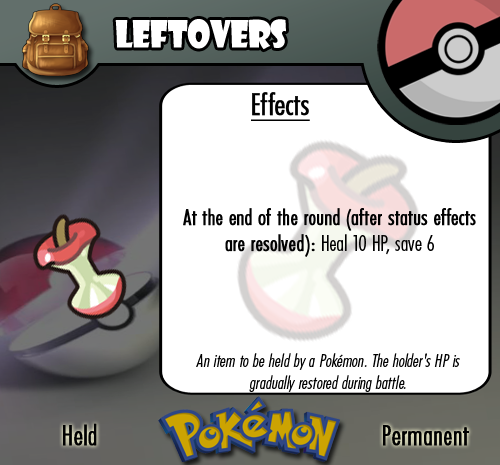
<style>
.page{position:relative;width:500px;height:465px;background:#ffffff}
.page>*{position:absolute;margin:0}
.t1{font:36.7px "ShowcardGothic-Reg";letter-spacing:-0.025em;color:#ffffff;scale:0.91 1}
.t2{font:22.2px "FuturaCondensedBQ-Light";color:#010101;font-weight:bold}
.t3{font:27.8px "FuturaCondensedBQ-Light";color:#010101;font-weight:bold}
.t4{font:30.6px "FuturaCondensedBQ-Light";color:#010101;font-weight:bold;text-decoration:underline}
.t5{font:22.2px "FuturaCondensedBQ-Light";color:#010101}
.t6{font:18.1px "FuturaCondensedBQ-Light";color:#010101;font-style:italic}
</style>
<div class="page">
<p class="t1" style="left:115px;top:19px;width:171px;height:31px">Leftovers</p>
<p class="t2" style="left:183px;top:92px;width:293px;height:165px"><span class="t3">  </span><span class="t4">Effects<br><br><br><br><br><br><br></span>At the end of the round (after status effects are resolved): <span class="t5">Heal 10 HP, save 6</span></p>
<p class="t6" style="left:196px;top:353px;width:264px;height:39px;text-align:center">An item to be held by a Pokémon. The holder's HP is gradually restored during battle.</p>
<p class="t3" style="left:63px;top:423px;width:34px;height:23px">Held</p>
<p class="t3" style="left:383px;top:425px;width:86px;height:21px">Permanent</p>
</div>
